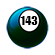
<style>
.page{position:relative;width:55px;height:55px;background:#ffffff}
.page>*{position:absolute;margin:0}
.t1{font:12px "Impact";color:#000000}
</style>
<div class="page">
<p class="t1" style="left:20px;top:16px;width:18px;height:9px">143</p>
</div>
